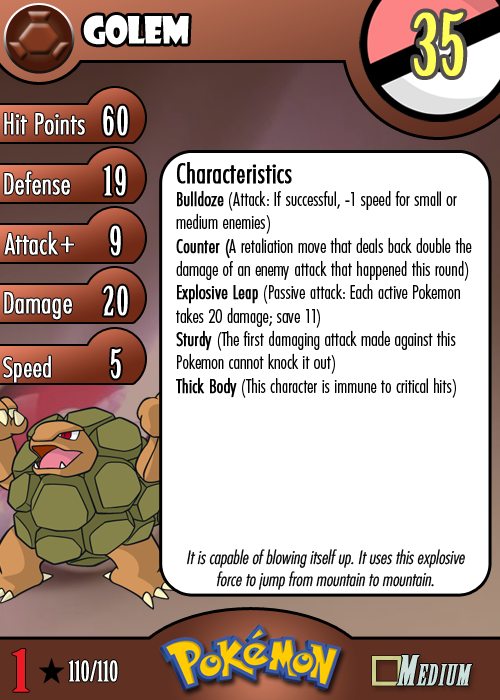
<style>
.page{position:relative;width:500px;height:700px;background:#ffffff}
.page>*{position:absolute;margin:0}
.t1{font:36.7px "ShowcardGothic-Reg";letter-spacing:-0.025em;color:#ffffff;scale:0.91 1}
.t2{font:83.3px "BirchStd";letter-spacing:0.025em;color:#fffd59;font-weight:bold}
.t3{font:27.8px "Futura-CondensedLight";color:#ffffff;font-weight:bold}
.t4{font:38.9px "BirchStd";letter-spacing:0.035em;color:#ffffff;font-weight:bold}
.t5{font:19.4px "FuturaCondensedBQ-Light";color:#010101}
.t6{font:27.8px "FuturaCondensedBQ-Light";color:#010101;font-weight:bold}
.t7{font:19.4px "FuturaCondensedBQ-Light";color:#010101;font-weight:bold}
.t8{font:30.6px "Futura-CondensedLight";color:#ffffff;font-weight:bold}
.t9{font:27.8px "FuturaCondensedBQ-Light";color:#ffffff;font-weight:bold}
.t10{font:18.1px "Futura-CondensedLight";color:#010101;font-style:italic}
.t11{font:55.6px "BirchStd";color:#ed1c24;font-weight:bold;scale:1.5 1}
.t12{font:27.8px "BirchStd";color:#ffffff;font-weight:bold}
</style>
<div class="page">
<p class="t1" style="left:83px;top:15px;width:106px;height:30px">golem</p>
<p class="t2" style="left:414px;top:12px;width:50px;height:64px">35</p>
<p class="t3" style="left:4px;top:113px;width:81px;height:22px">Hit Points</p>
<p class="t4" style="left:103px;top:105px;width:25px;height:31px">60</p>
<p class="t3" style="left:4px;top:171px;width:66px;height:24px">Defense</p>
<p class="t4" style="left:104px;top:165px;width:22px;height:31px">19</p>
<p class="t5" style="left:176px;top:162px;width:296px;height:236px"><span class="t6">Characteristics<br></span><span class="t7">Bulldoze</span> (Attack: If successful, -1 speed for small or medium enemies)<br><span class="t7">Counter (</span>A retaliation move that deals back double the damage of an enemy attack that happened this round)<br><span class="t7">Explosive Leap</span> (Passive attack: Each active Pokemon takes 20 damage; save 11)<br><span class="t7">Sturdy</span> (The first damaging attack made against this Pokemon cannot knock it out)<br><span class="t7">Thick Body</span> (This character is immune to critical hits)</p>
<p class="t3" style="left:4px;top:231px;width:54px;height:24px">Attack</p>
<p class="t4" style="left:110px;top:225px;width:11px;height:31px">9</p>
<p class="t8" style="left:60px;top:236px;width:14px;height:17px">+</p>
<p class="t3" style="left:4px;top:292px;width:68px;height:28px">Damage</p>
<p class="t4" style="left:103px;top:285px;width:25px;height:31px">20</p>
<p class="t4" style="left:111px;top:348px;width:10px;height:31px">5</p>
<p class="t9" style="left:3px;top:355px;width:48px;height:28px">Speed</p>
<p class="t10" style="left:187px;top:549px;width:278px;height:41px;text-align:center">It is capable of blowing itself up. It uses this explosive force to jump from mountain to mountain.</p>
<p class="t11" style="left:12px;top:649px;width:17px;height:43px">1</p>
<p class="t12" style="left:68px;top:660px;width:50px;height:22px">110/110</p>
</div>
